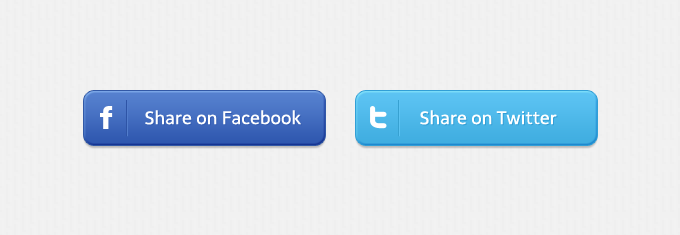
<style>
.page{position:relative;width:680px;height:235px;background:#f1f1f1}
.page>*{position:absolute;margin:0}
.t1{font:18px "Telex-Regular";color:#ffffff}
</style>
<div class="page">
<p class="t1" style="left:145px;top:110px;width:156px;height:15px">Share on Facebook</p>
<p class="t1" style="left:420px;top:110px;width:137px;height:15px">Share on Twitter</p>
</div>
